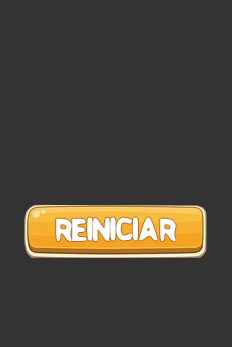
<style>
.page{position:relative;width:232px;height:347px;background:#333333}
.page>*{position:absolute;margin:0}
.t1{font:30px "Game_Time";color:#ffffff}
</style>
<div class="page">
<p class="t1" style="left:56px;top:217px;width:120px;height:25px">REINICIAR</p>
</div>
